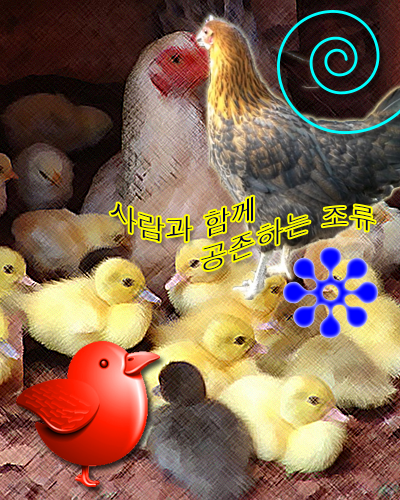
<style>
.page{position:relative;width:400px;height:500px}
.page>*{position:absolute;margin:0}
.t1{font:28px "Dotum";color:#000033}
</style>
<div class="page">
<p class="t1" style="left:110px;top:196px;width:265px;height:74px">사람과 함께<br>    공존하는 조류</p>
</div>
